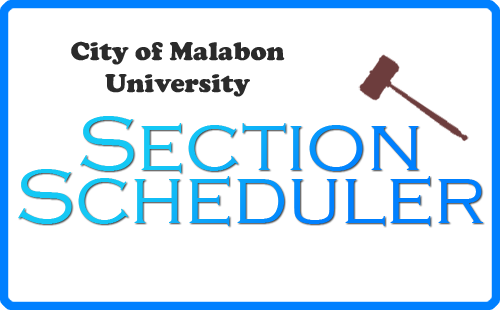
<style>
.page{position:relative;width:500px;height:310px;background:#ffffff}
.page>*{position:absolute;margin:0}
.t1{font:26.8px "CooperBlack";color:#2b2b2b}
.t2{font:80.4px "CopperplateGothic-Light"}
</style>
<div class="page">
<p class="t1" style="left:71px;top:41px;width:214px;height:56px;text-align:center">City of Malabon University</p>
<p class="t2" style="left:18px;top:116px;width:465px;height:110px">Section Scheduler</p>
</div>
